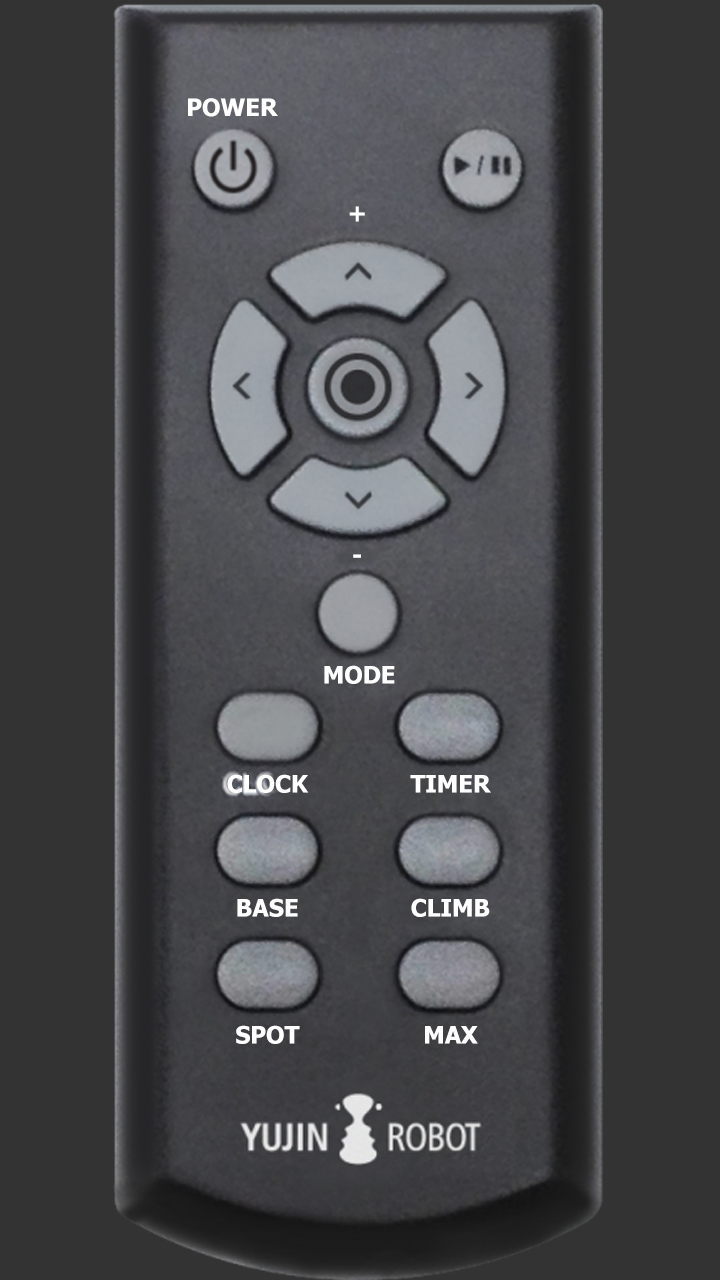
<style>
.page{position:relative;width:720px;height:1280px;background:#333333}
.page>*{position:absolute;margin:0}
.t1{font:24px "Tahoma-Bold";color:#ffffff}
</style>
<div class="page">
<p class="t1" style="left:188px;top:98px;width:90px;height:19px">POWER</p>
<p class="t1" style="left:349px;top:206px;width:16px;height:16px">+</p>
<p class="t1" style="left:353px;top:554px;width:8px;height:4px">-</p>
<p class="t1" style="left:324px;top:665px;width:71px;height:19px">MODE</p>
<p class="t1" style="left:227px;top:774px;width:82px;height:19px">CLOCK</p>
<p class="t1" style="left:410px;top:775px;width:81px;height:18px">TIMER</p>
<p class="t1" style="left:237px;top:898px;width:61px;height:19px">BASE</p>
<p class="t1" style="left:411px;top:898px;width:79px;height:19px">CLIMB</p>
<p class="t1" style="left:236px;top:1025px;width:64px;height:19px">SPOT</p>
<p class="t1" style="left:425px;top:1026px;width:53px;height:18px">MAX</p>
</div>
